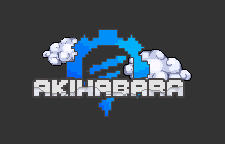
<style>
.page{position:relative;width:225px;height:144px;background:#333333}
.page>*{position:absolute;margin:0}
.t1{font:36px "ThaleahFat";color:#e3e3e3}
</style>
<div class="page">
<p class="t1" style="left:34px;top:80px;width:149px;height:16px">akihabara</p>
</div>
